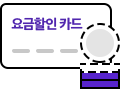
<style>
.page{position:relative;width:120px;height:90px;background:#ffffff}
.page>*{position:absolute;margin:0}
.t1{font:14px "AppleSDGothicNeoEB00";letter-spacing:-0.06em;color:#5026ae}
</style>
<div class="page">
<p class="t1" style="left:11px;top:17px;width:72px;height:14px">요금할인 카드</p>
</div>
